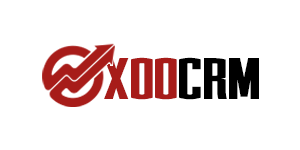
<style>
.page{position:relative;width:300px;height:150px;background:#ffffff}
.page>*{position:absolute;margin:0}
.t1{font:58.4px "Perca";color:#a71c19}
.t2{font:58.4px "Perca";color:#000000}
</style>
<div class="page">
<p class="t1" style="left:104px;top:57px;width:155px;height:43px">XOO<span class="t2">CRM</span></p>
</div>
